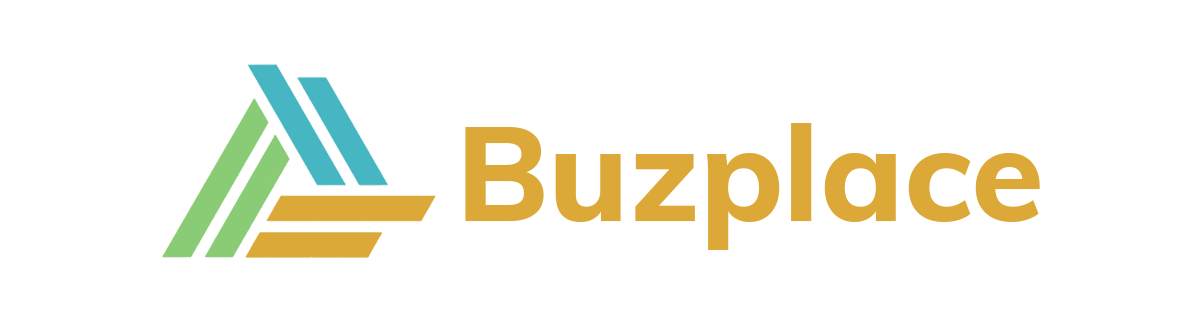
<style>
.page{position:relative;width:1200px;height:322px;background:#ffffff}
.page>*{position:absolute;margin:0}
.t1{font:133px "Muli-ExtraBold";color:#dca838}
</style>
<div class="page">
<p class="t1" style="left:465px;top:123px;width:575px;height:127px">Buzplace</p>
</div>
